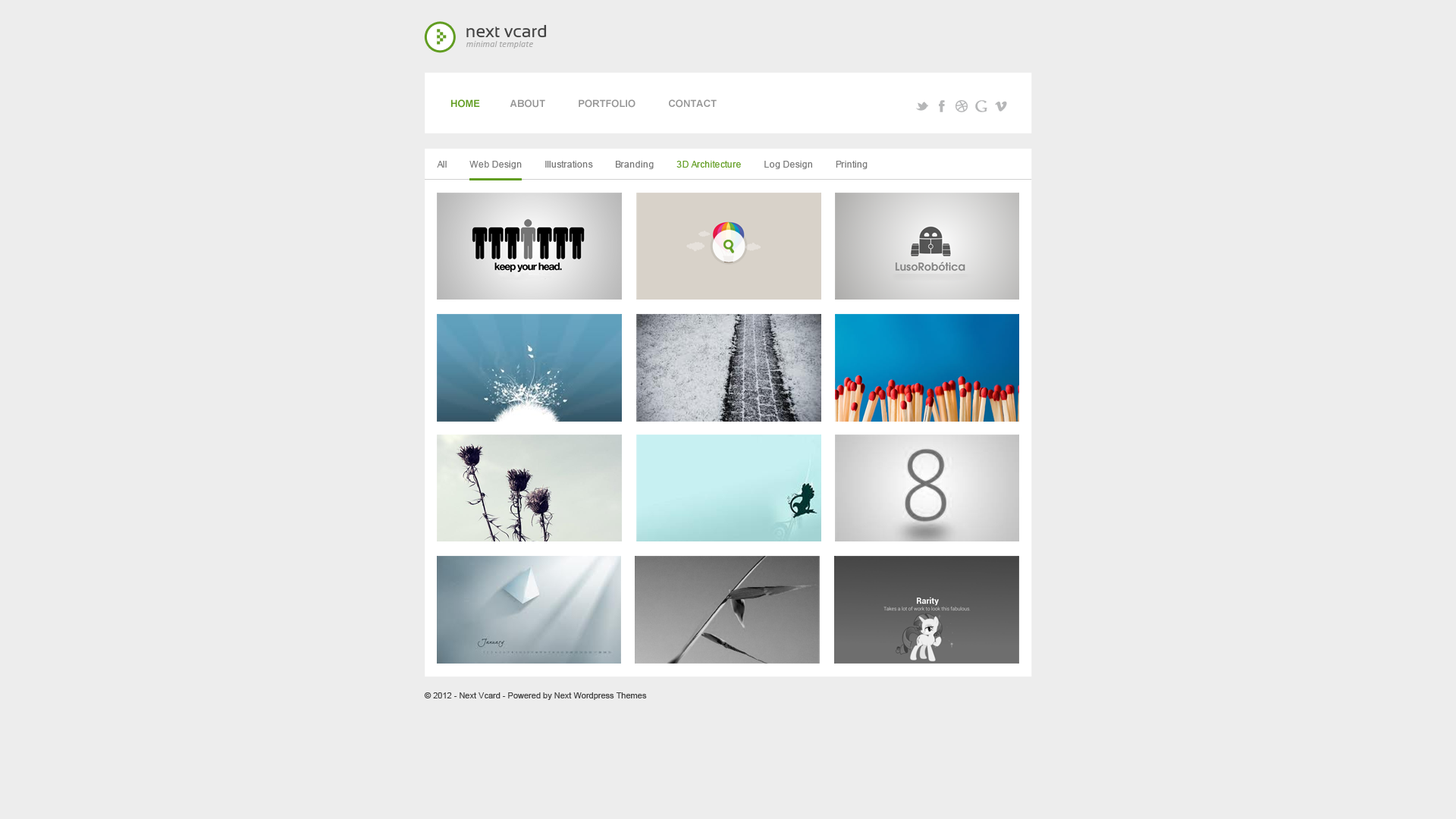
<style>
.page{position:relative;width:1456px;height:819px;background:#ededed}
.page>*{position:absolute;margin:0}
.t1{font:17.4px "Sansation-Regular";color:#414141}
.t2{font:9.3px "Calibri-Italic";color:#acacac}
.t3{font:9.9px "Arial-BoldMT";color:#969696;text-transform:uppercase}
.t4{font:9.9px "Arial-BoldMT";color:#619d21;text-transform:uppercase}
.t5{font:9.1px "ArialMT";color:#787878}
.t6{font:9.1px "ArialMT";color:#619d21}
.t7{font:8.3px "ArialMT";color:#424242}
</style>
<div class="page">
<p class="t1" style="left:466px;top:24px;width:81px;height:14px">next vcard</p>
<p class="t2" style="left:466px;top:41px;width:67px;height:8px">minimal template</p>
<p class="t3" style="left:451px;top:99px;width:266px;height:9px"><span class="t4">Home           </span>About            Portfolio            Contact</p>
<p class="t5" style="left:437px;top:161px;width:431px;height:8px">All          Web Design          Illustrations          Branding        <span class="t6">  3D Architecture </span>         Log Design          Printing</p>
<p class="t7" style="left:424px;top:692px;width:223px;height:8px">© 2012 - Next Vcard - Powered by Next Wordpress Themes</p>
</div>
